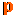
<style>
.page{position:relative;width:16px;height:16px;background:#ffffff}
.page>*{position:absolute;margin:0}
.t1{font:18px "BioSans-Bold";letter-spacing:0.01em;color:#ff5a00}
</style>
<div class="page">
<p class="t1" style="left:3px;top:2px;width:9px;height:13px">p</p>
<p class="t1" style="left:4px;top:2px;width:9px;height:13px">p</p>
</div>
